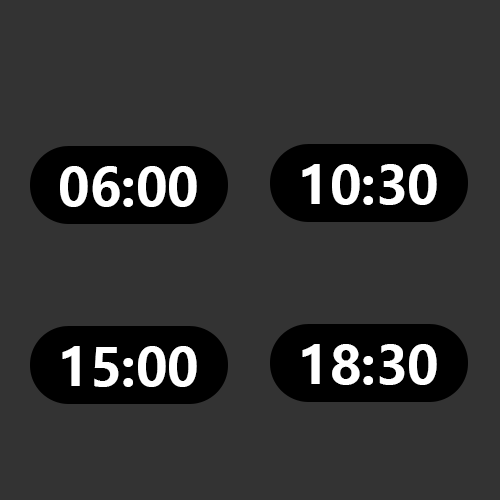
<style>
.page{position:relative;width:500px;height:500px;background:#333333}
.page>*{position:absolute;margin:0}
.t1{font:51px "MicrosoftYaHei-Bold";color:#ffffff}
</style>
<div class="page">
<p class="t1" style="left:60px;top:166px;width:137px;height:41px">06:00</p>
<p class="t1" style="left:302px;top:164px;width:135px;height:41px">10:30</p>
<p class="t1" style="left:62px;top:346px;width:135px;height:41px">15:00</p>
<p class="t1" style="left:302px;top:344px;width:135px;height:41px">18:30</p>
</div>
